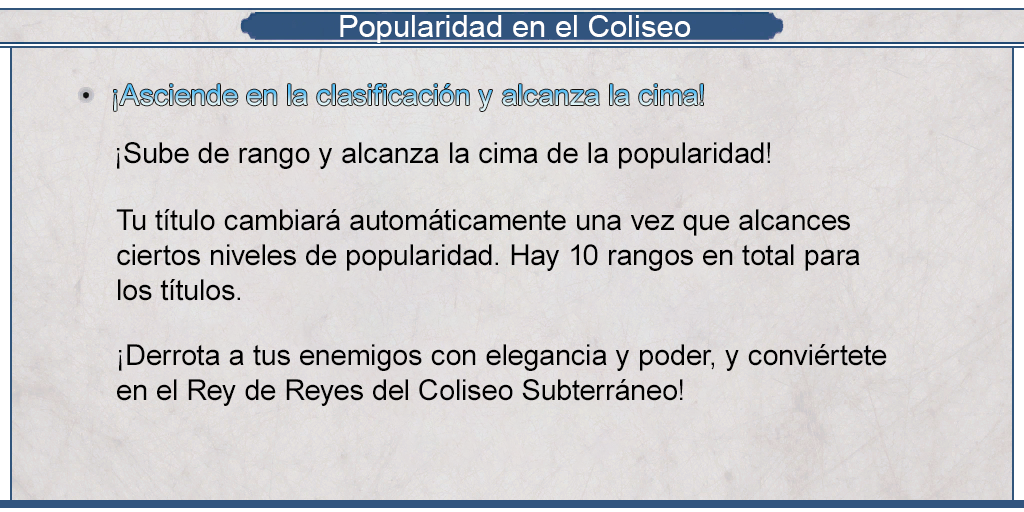
<style>
.page{position:relative;width:1024px;height:512px}
.page>*{position:absolute;margin:0}
.t1{font:30.8px "ArialMT";color:#ffffff}
.t2{font:29px "ArialMT";color:#000000}
</style>
<div class="page">
<p class="t1" style="left:340px;top:15px;width:351px;height:28px">Popularidad en el Coliseo</p>
<p class="t2" style="left:117px;top:142px;width:653px;height:27px">¡Sube de rango y alcanza la cima de la popularidad!</p>
<p class="t2" style="left:116px;top:209px;width:744px;height:92px">Tu título cambiará automáticamente una vez que alcances <br>ciertos niveles de popularidad. Hay 10 rangos en total para <br>los títulos.</p>
<p class="t2" style="left:117px;top:344px;width:770px;height:62px">¡Derrota a tus enemigos con elegancia y poder, y conviértete <br>en el Rey de Reyes del Coliseo Subterráneo!</p>
</div>
